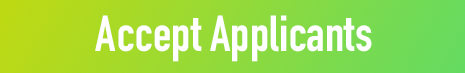
<style>
.page{position:relative;width:465px;height:73px}
.page>*{position:absolute;margin:0}
.t1{font:50px "DINCondensed-Bold";color:#ffffff}
</style>
<div class="page">
<p class="t1" style="left:95px;top:15px;width:277px;height:47px">Accept Applicants</p>
</div>
